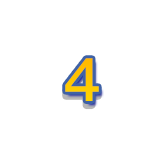
<style>
.page{position:relative;width:164px;height:164px;background:#ffffff}
.page>*{position:absolute;margin:0}
.t1{font:59.8px "PingFangHK-Semibold";color:#ffc800;text-transform:uppercase}
</style>
<div class="page">
<p class="t1" style="left:65px;top:58px;width:34px;height:43px">4</p>
</div>
